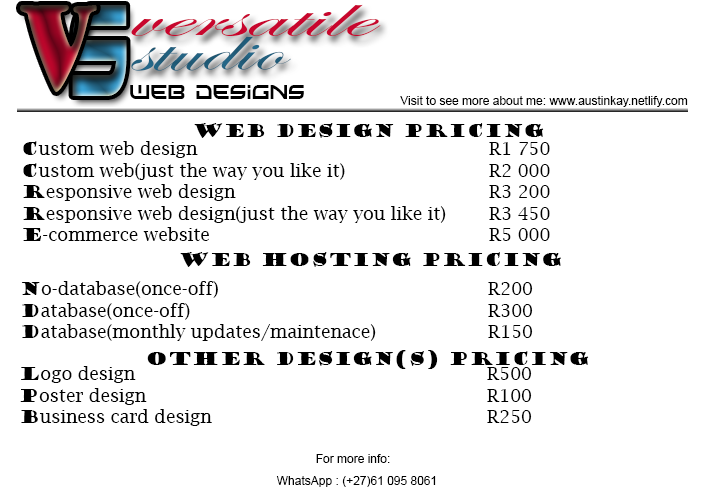
<style>
.page{position:relative;width:704px;height:503px;background:#ffffff}
.page>*{position:absolute;margin:0}
.t1{font:111.3px "GoudyStout";scale:0.66 1}
.t2{font:121.2px "Xirod";scale:0.48 1}
.t3{font:61px "EdwardianScriptITC";color:#c8062e;scale:1.92 1}
.t4{font:63.6px "EdwardianScriptITC";color:#215e7c;scale:1.61 1}
.t5{font:18px "Xirod";color:#000000;scale:0.89 1}
.t6{font:12px "ArialMT";color:#000000}
.t7{font:18px "GoudyStout";color:#000000}
.t8{font:18px "LucidaBright";color:#000000}
</style>
<div class="page">
<p class="t1" style="left:20px;top:5px;width:77px;height:87px">v</p>
<p class="t2" style="left:72px;top:5px;width:55px;height:91px">s</p>
<p class="t3" style="left:131px;top:4px;width:250px;height:32px">versatile</p>
<p class="t4" style="left:131px;top:36px;width:160px;height:35px;rotate:-1deg">studio</p>
<p class="t5" style="left:130px;top:85px;width:174px;height:14px">web designs</p>
<p class="t6" style="left:400px;top:96px;width:288px;height:11px">Visit to see more about me: www.austinkay.netlify.com</p>
<p class="t7" style="left:194px;top:123px;width:350px;height:15px">web design pricing</p>
<p class="t8" style="left:23px;top:141px;width:527px;height:100px"><span class="t7">c</span>ustom web design         R1 750<br><span class="t7">c</span>ustom web(just the way you like it)    R2 000<br><span class="t7">r</span>esponsive web design        R3 200<br><span class="t7">r</span>esponsive web design(just the way you like it)  R3 450<br><span class="t7">e</span>-commerce website        R5 000</p>
<p class="t7" style="left:180px;top:252px;width:381px;height:15px">web hosting pricing</p>
<p class="t8" style="left:21px;top:281px;width:512px;height:60px"><span class="t7">n</span>o-database(once-off)        R200<br><span class="t7">d</span>atabase(once-off)         R300<br><span class="t7">d</span>atabase(monthly updates/maintenace)    R150</p>
<p class="t7" style="left:147px;top:350px;width:442px;height:19px">other design(s) pricing</p>
<p class="t8" style="left:20px;top:366px;width:512px;height:60px"><span class="t7">l</span>ogo design          R500<br><span class="t7">p</span>oster design          R100<br><span class="t7">b</span>usiness card design        R250</p>
<p class="t6" style="left:316px;top:454px;width:74px;height:9px">For more info:</p>
<p class="t6" style="left:276px;top:476px;width:160px;height:11px">WhatsApp : (+27)61 095 8061</p>
</div>
